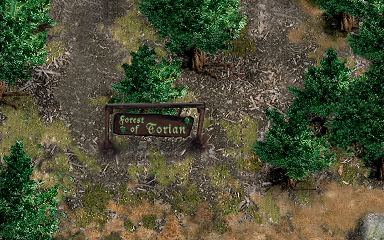
<style>
.page{position:relative;width:384px;height:240px}
.page>*{position:absolute;margin:0}
.t1{font:9px "DucDeBerry";letter-spacing:0.08em;color:#a4b178}
.t2{font:9px "DucDeBerry";letter-spacing:0.08em}
.t3{font:9px "DucDeBerry";letter-spacing:0.08em;color:#bac290}
.t4{font:13px "DucDeBerry";letter-spacing:0.08em;color:#a4b178}
.t5{font:13px "DucDeBerry";letter-spacing:0.08em}
</style>
<div class="page">
<p class="t1" style="left:119px;top:115px;width:25px;height:10px;rotate:2deg">Forest</p>
<p class="t2" style="left:120px;top:115px;width:25px;height:9px;rotate:2deg">Forest</p>
<p class="t3" style="left:130px;top:125px;width:10px;height:10px">of</p>
<p class="t2" style="left:131px;top:124px;width:9px;height:10px">of</p>
<p class="t4" style="left:146px;top:123px;width:40px;height:11px">Torian</p>
<p class="t5" style="left:147px;top:122px;width:40px;height:12px">Torian</p>
</div>
